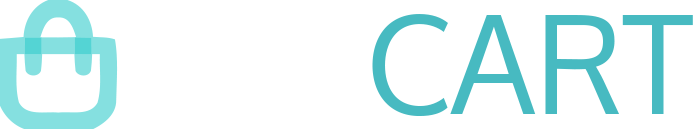
<style>
.page{position:relative;width:693px;height:129px;background:#ffffff}
.page>*{position:absolute;margin:0}
.t1{font:134.3px "Oxygen";color:#47bac1}
.t2{font:134.3px "Oxygen-Bold";color:#ffffff}
</style>
<div class="page">
<p class="t1" style="left:158px;top:14px;width:535px;height:102px"><span class="t2">BIG</span>CART</p>
</div>
